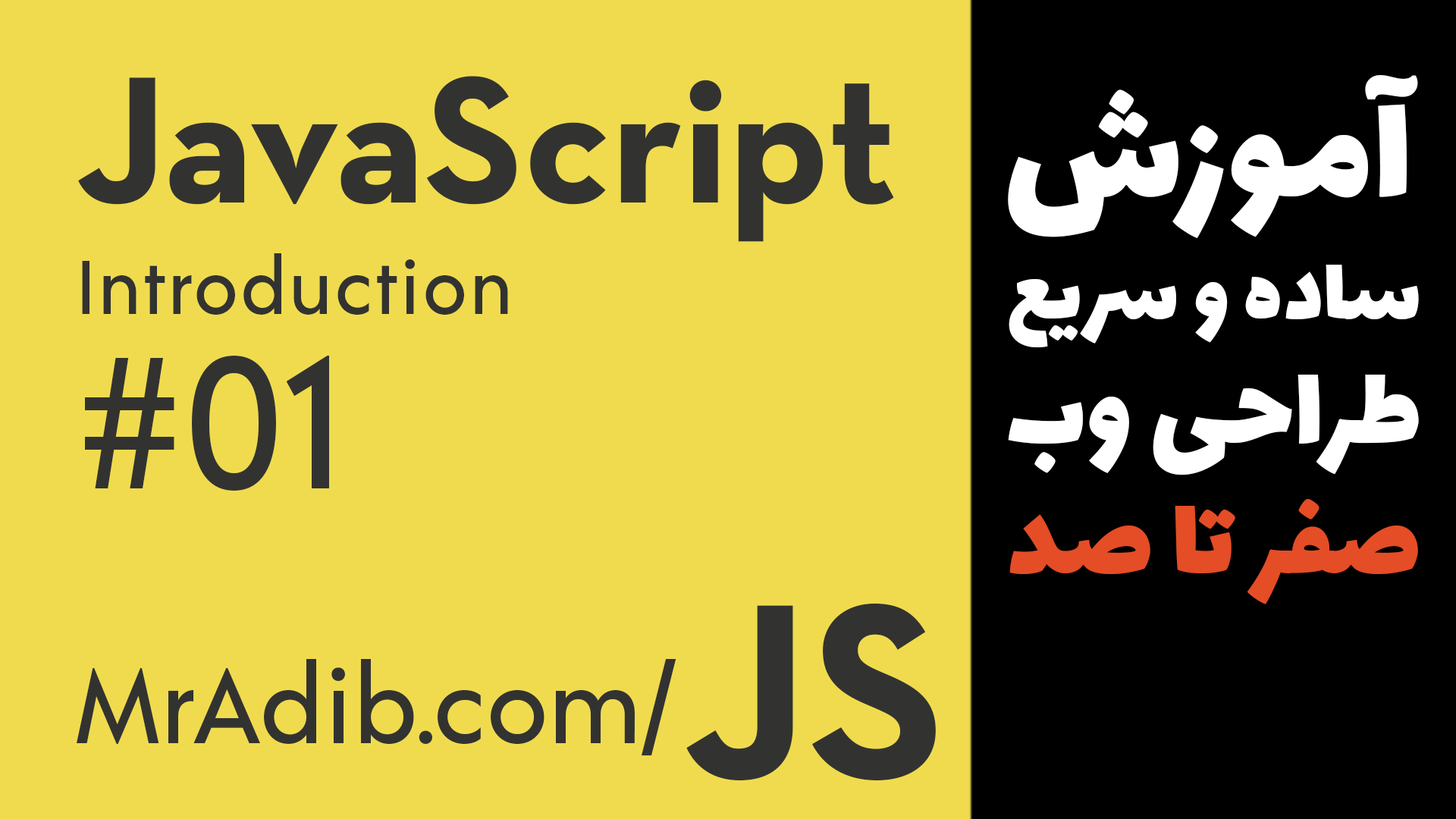
<style>
.page{position:relative;width:1456px;height:819px;background:#f0db4f}
.page>*{position:absolute;margin:0}
.t1{font:183.6px "NeutraText-Bold";color:#323330}
.t2{font:162.5px "Lalezar-Regular";color:#ffffff}
.t3{font:75.8px "Acre-Medium";letter-spacing:0.025em;color:#323330}
.t4{font:96.1px "Lalezar-Regular";color:#ffffff}
.t5{font:185.9px "Acre-Medium";color:#323330}
.t6{font:121.8px "Lalezar-Regular";color:#ffffff}
.t7{font:120.3px "Lalezar-Regular";color:#e44d26}
.t8{font:253.6px "NeutraText-Bold";color:#323330}
.t9{font:104.8px "Acre-Medium";color:#323330}
</style>
<div class="page">
<p class="t1" style="left:78px;top:76px;width:816px;height:166px">JavaScript</p>
<p class="t2" style="left:1008px;top:75px;width:410px;height:163px">آموزش</p>
<p class="t3" style="left:82px;top:253px;width:426px;height:62px">Introduction</p>
<p class="t4" style="left:1009px;top:265px;width:410px;height:82px">ساده و سریع</p>
<p class="t5" style="left:85px;top:356px;width:244px;height:135px">#01</p>
<p class="t6" style="left:1008px;top:375px;width:411px;height:100px">طراحی وب</p>
<p class="t7" style="left:1009px;top:499px;width:409px;height:105px">صفر تا صد</p>
<p class="t8" style="left:686px;top:603px;width:250px;height:178px">JS</p>
<p class="t9" style="left:77px;top:659px;width:599px;height:97px">MrAdib.com/</p>
</div>
